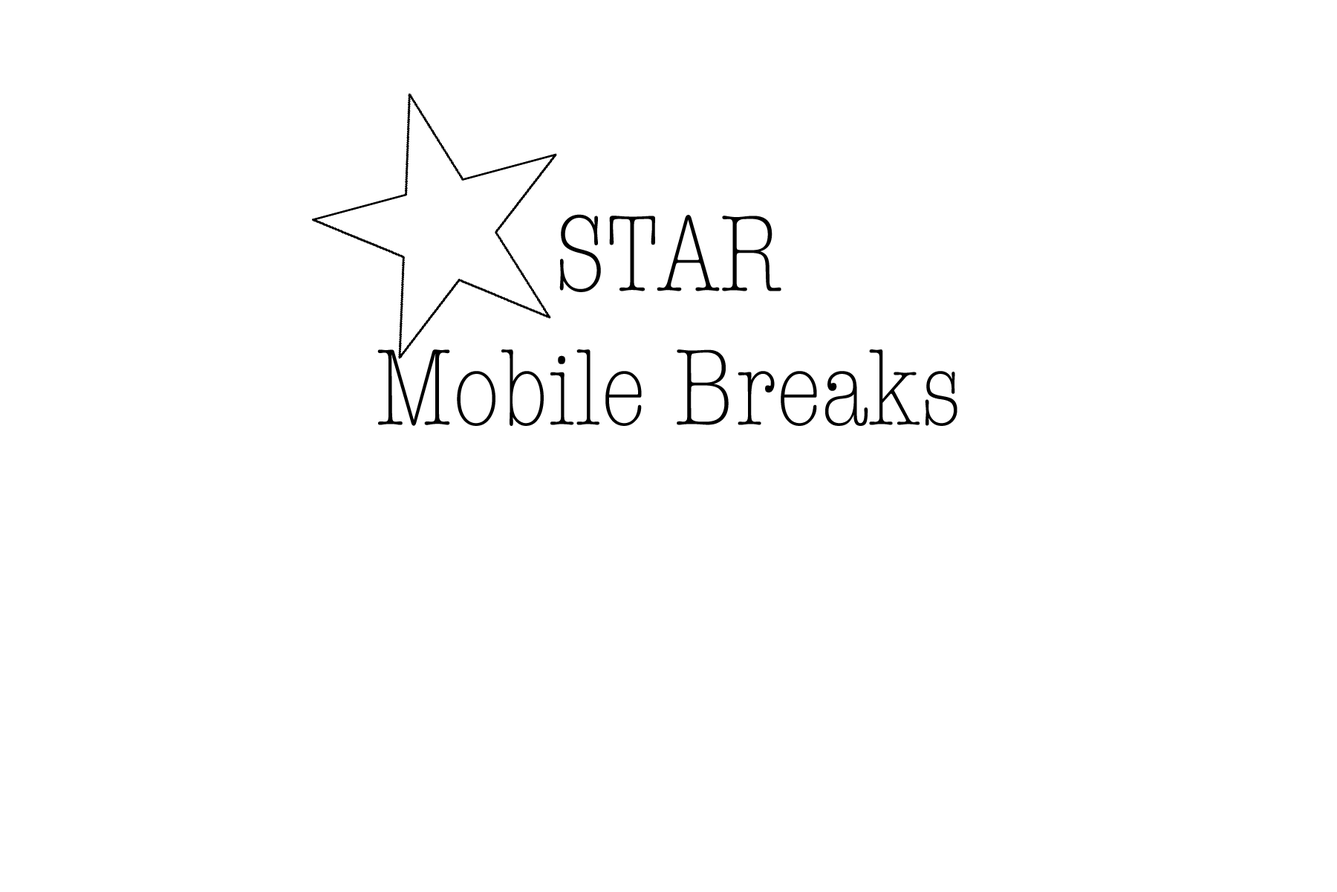
<style>
.page{position:relative;width:1337px;height:892px;background:#ffffff}
.page>*{position:absolute;margin:0}
.t1{font:111.5px "AmericanTypewriter-CondensedLight";color:#000000}
</style>
<div class="page">
<p class="t1" style="left:377px;top:214px;width:581px;height:212px;text-align:center">STAR <br>Mobile Breaks</p>
</div>
